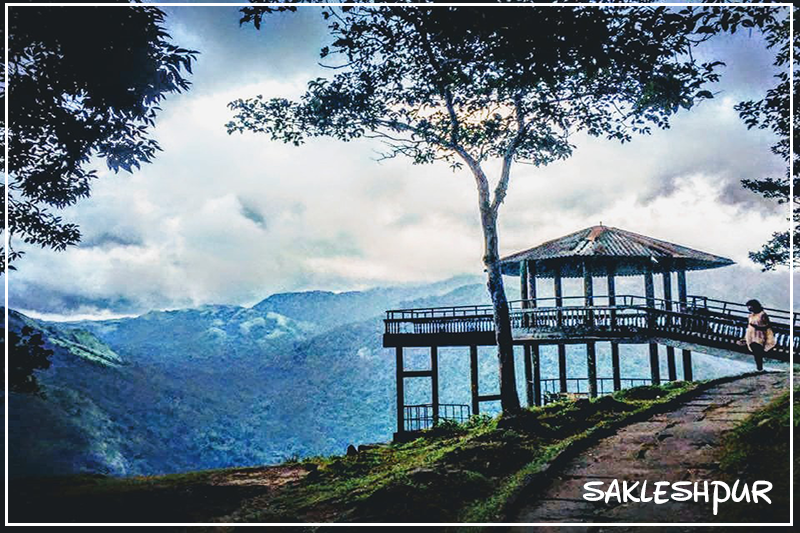
<style>
.page{position:relative;width:800px;height:533px}
.page>*{position:absolute;margin:0}
.t1{font:60px "New-Walt-Disney-Font";color:#ffffff}
</style>
<div class="page">
<p class="t1" style="left:583px;top:479px;width:190px;height:36px">sakleshpur</p>
</div>
